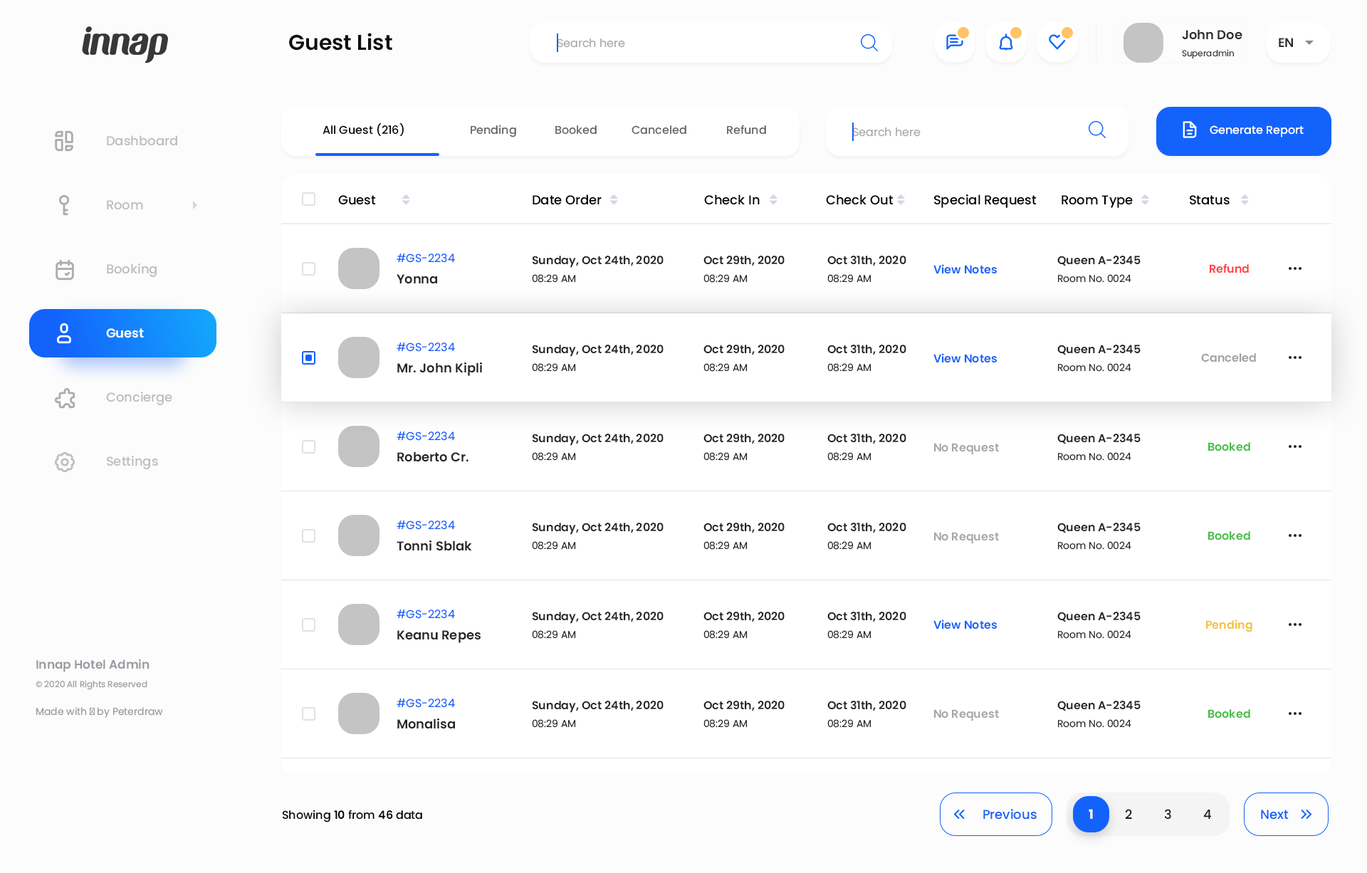
<style>
.page{position:relative;width:1367px;height:873px;background:#ffffff}
.page>*{position:absolute;margin:0}
.t1{font:12.8px "Poppins-SemiBold";color:#2e2e2e}
.t2{font:21.4px "Poppins-SemiBold";color:#0f0f0f}
.t3{font:11.4px "Poppins-Regular";color:#aaaaaa}
.t4{font:8.5px "Poppins-Regular";color:#2e2e2e}
.t5{font:11.4px "Poppins-Medium";color:#000000}
.t6{font:11.4px "Poppins-Medium";color:#666666}
.t7{font:11.4px "Poppins-Medium";color:#ffffff}
.t8{font:12.8px "Poppins-Medium";color:#bfbfbf}
.t9{font:12.8px "Poppins-Medium";color:#000000}
.t10{font:11.4px "Poppins-Regular";color:#1362fc}
.t11{font:11.4px "Poppins-SemiBold";color:#262626}
.t12{font:11.4px "Poppins-SemiBold";color:#1362fc}
.t13{font:11.4px "Poppins-SemiBold";color:#ff4242}
.t14{font:12.8px "Poppins-SemiBold";color:#262626}
.t15{font:10px "Poppins-Regular";color:#262626}
.t16{font:12.8px "Poppins-SemiBold";color:#ffffff}
.t17{font:11.4px "Poppins-SemiBold";color:#a1a1a1}
.t18{font:11.4px "Poppins-SemiBold";color:#a7a7a7}
.t19{font:11.4px "Poppins-SemiBold";color:#45bf43}
.t20{font:11.4px "Poppins-SemiBold";color:#f3c13e}
.t21{font:8.5px/18.5px "Poppins-Regular";color:#969ba0}
.t22{font:12.1px/18.5px "Poppins-SemiBold";color:#969ba0}
.t23{font:10px "Poppins-Regular";color:#969ba0}
.t24{font:11.4px "Poppins-SemiBold";color:#000000}
.t25{font:12.8px "Poppins-Medium";color:#1362fc}
.t26{font:12.8px "Poppins-Bold";color:#ffffff}
.t27{font:12.8px "Poppins-Medium";color:#202020}
</style>
<div class="page">
<p class="t1" style="left:1181px;top:29px;width:61px;height:11px">John Doe</p>
<p class="t2" style="left:289px;top:33px;width:103px;height:18px">Guest List</p>
<p class="t3" style="left:557px;top:38px;width:68px;height:10px">Search here</p>
<p class="t1" style="left:1278px;top:38px;width:15px;height:9px">EN</p>
<p class="t4" style="left:1181px;top:49px;width:52px;height:10px">Superadmin</p>
<p class="t5" style="left:322px;top:123px;width:82px;height:13px">All Guest (216)</p>
<p class="t6" style="left:470px;top:125px;width:46px;height:12px">Pending</p>
<p class="t6" style="left:555px;top:125px;width:41px;height:10px">Booked</p>
<p class="t6" style="left:631px;top:125px;width:55px;height:10px">Canceled</p>
<p class="t6" style="left:727px;top:125px;width:39px;height:10px">Refund</p>
<p class="t7" style="left:1209px;top:125px;width:94px;height:12px">Generate Report</p>
<p class="t8" style="left:107px;top:135px;width:70px;height:11px">Dashboard</p>
<p class="t3" style="left:852px;top:127px;width:68px;height:10px">Search here</p>
<p class="t9" style="left:338px;top:195px;width:38px;height:10px">Guest</p>
<p class="t9" style="left:532px;top:194px;width:69px;height:11px">Date Order</p>
<p class="t9" style="left:704px;top:194px;width:55px;height:11px">Check In</p>
<p class="t9" style="left:826px;top:194px;width:67px;height:11px">Check Out</p>
<p class="t9" style="left:934px;top:194px;width:102px;height:14px">Special Request</p>
<p class="t9" style="left:1061px;top:195px;width:71px;height:13px">Room Type</p>
<p class="t9" style="left:1189px;top:195px;width:40px;height:10px">Status</p>
<p class="t8" style="left:107px;top:200px;width:36px;height:10px">Room</p>
<p class="t10" style="left:396px;top:253px;width:59px;height:10px">#GS-2234</p>
<p class="t11" style="left:532px;top:256px;width:131px;height:12px">Sunday, Oct 24th, 2020</p>
<p class="t11" style="left:703px;top:256px;width:81px;height:10px">Oct 29th, 2020</p>
<p class="t11" style="left:827px;top:256px;width:79px;height:10px">Oct 31th, 2020</p>
<p class="t11" style="left:1057px;top:256px;width:83px;height:9px">Queen A-2345</p>
<p class="t8" style="left:107px;top:263px;width:50px;height:14px">Booking</p>
<p class="t12" style="left:933px;top:264px;width:63px;height:10px">View Notes</p>
<p class="t13" style="left:1209px;top:263px;width:39px;height:10px">Refund</p>
<p class="t14" style="left:396px;top:274px;width:41px;height:10px">Yonna</p>
<p class="t15" style="left:532px;top:274px;width:44px;height:9px">08:29 AM</p>
<p class="t15" style="left:703px;top:274px;width:44px;height:9px">08:29 AM</p>
<p class="t15" style="left:827px;top:274px;width:44px;height:9px">08:29 AM</p>
<p class="t15" style="left:1058px;top:274px;width:73px;height:9px">Room No. 0024</p>
<p class="t16" style="left:106px;top:328px;width:38px;height:10px">Guest</p>
<p class="t10" style="left:396px;top:342px;width:59px;height:10px">#GS-2234</p>
<p class="t11" style="left:532px;top:344px;width:131px;height:13px">Sunday, Oct 24th, 2020</p>
<p class="t11" style="left:703px;top:344px;width:81px;height:11px">Oct 29th, 2020</p>
<p class="t11" style="left:827px;top:344px;width:79px;height:11px">Oct 31th, 2020</p>
<p class="t12" style="left:933px;top:353px;width:63px;height:10px">View Notes</p>
<p class="t11" style="left:1057px;top:344px;width:83px;height:10px">Queen A-2345</p>
<p class="t17" style="left:1201px;top:353px;width:55px;height:9px">Canceled</p>
<p class="t14" style="left:397px;top:362px;width:85px;height:14px">Mr. John Kipli</p>
<p class="t15" style="left:532px;top:363px;width:44px;height:9px">08:29 AM</p>
<p class="t15" style="left:703px;top:363px;width:44px;height:9px">08:29 AM</p>
<p class="t15" style="left:827px;top:363px;width:44px;height:9px">08:29 AM</p>
<p class="t15" style="left:1058px;top:363px;width:73px;height:9px">Room No. 0024</p>
<p class="t8" style="left:106px;top:391px;width:66px;height:14px">Concierge</p>
<p class="t10" style="left:396px;top:431px;width:59px;height:10px">#GS-2234</p>
<p class="t11" style="left:532px;top:433px;width:131px;height:13px">Sunday, Oct 24th, 2020</p>
<p class="t11" style="left:703px;top:433px;width:81px;height:11px">Oct 29th, 2020</p>
<p class="t11" style="left:827px;top:433px;width:79px;height:11px">Oct 31th, 2020</p>
<p class="t11" style="left:1057px;top:433px;width:83px;height:10px">Queen A-2345</p>
<p class="t18" style="left:934px;top:443px;width:65px;height:12px">No Request</p>
<p class="t19" style="left:1208px;top:442px;width:42px;height:9px">Booked</p>
<p class="t8" style="left:107px;top:456px;width:51px;height:13px">Settings</p>
<p class="t14" style="left:397px;top:451px;width:71px;height:11px">Roberto Cr.</p>
<p class="t15" style="left:532px;top:452px;width:44px;height:8px">08:29 AM</p>
<p class="t15" style="left:703px;top:452px;width:44px;height:8px">08:29 AM</p>
<p class="t15" style="left:827px;top:452px;width:44px;height:8px">08:29 AM</p>
<p class="t15" style="left:1058px;top:452px;width:73px;height:8px">Room No. 0024</p>
<p class="t10" style="left:396px;top:520px;width:59px;height:10px">#GS-2234</p>
<p class="t11" style="left:532px;top:522px;width:131px;height:13px">Sunday, Oct 24th, 2020</p>
<p class="t11" style="left:703px;top:522px;width:81px;height:11px">Oct 29th, 2020</p>
<p class="t11" style="left:827px;top:522px;width:79px;height:11px">Oct 31th, 2020</p>
<p class="t18" style="left:934px;top:532px;width:65px;height:12px">No Request</p>
<p class="t11" style="left:1057px;top:522px;width:83px;height:10px">Queen A-2345</p>
<p class="t19" style="left:1208px;top:531px;width:42px;height:9px">Booked</p>
<p class="t14" style="left:396px;top:540px;width:76px;height:11px">Tonni Sblak</p>
<p class="t15" style="left:532px;top:541px;width:44px;height:8px">08:29 AM</p>
<p class="t15" style="left:703px;top:541px;width:44px;height:8px">08:29 AM</p>
<p class="t15" style="left:827px;top:541px;width:44px;height:8px">08:29 AM</p>
<p class="t15" style="left:1058px;top:541px;width:73px;height:8px">Room No. 0024</p>
<p class="t10" style="left:396px;top:609px;width:59px;height:10px">#GS-2234</p>
<p class="t11" style="left:532px;top:611px;width:131px;height:12px">Sunday, Oct 24th, 2020</p>
<p class="t11" style="left:703px;top:611px;width:81px;height:11px">Oct 29th, 2020</p>
<p class="t11" style="left:827px;top:611px;width:79px;height:11px">Oct 31th, 2020</p>
<p class="t11" style="left:1057px;top:611px;width:83px;height:10px">Queen A-2345</p>
<p class="t14" style="left:397px;top:630px;width:83px;height:13px">Keanu Repes</p>
<p class="t15" style="left:532px;top:630px;width:44px;height:8px">08:29 AM</p>
<p class="t15" style="left:703px;top:630px;width:44px;height:8px">08:29 AM</p>
<p class="t15" style="left:827px;top:630px;width:44px;height:8px">08:29 AM</p>
<p class="t12" style="left:933px;top:619px;width:63px;height:10px">View Notes</p>
<p class="t15" style="left:1058px;top:630px;width:73px;height:8px">Room No. 0024</p>
<p class="t20" style="left:1206px;top:619px;width:46px;height:13px">Pending</p>
<p class="t21" style="left:36px;top:658px;width:113px;height:32px"><span class="t22">Innap Hotel Admin<br></span>© 2020 All Rights Reserved</p>
<p class="t10" style="left:396px;top:698px;width:59px;height:9px">#GS-2234</p>
<p class="t11" style="left:532px;top:700px;width:131px;height:12px">Sunday, Oct 24th, 2020</p>
<p class="t11" style="left:703px;top:700px;width:81px;height:11px">Oct 29th, 2020</p>
<p class="t11" style="left:827px;top:700px;width:79px;height:11px">Oct 31th, 2020</p>
<p class="t11" style="left:1057px;top:700px;width:83px;height:10px">Queen A-2345</p>
<p class="t23" style="left:36px;top:707px;width:127px;height:10px">Made with ♥ by Peterdraw</p>
<p class="t18" style="left:934px;top:709px;width:65px;height:12px">No Request</p>
<p class="t19" style="left:1208px;top:709px;width:42px;height:9px">Booked</p>
<p class="t14" style="left:397px;top:718px;width:58px;height:11px">Monalisa</p>
<p class="t15" style="left:532px;top:719px;width:44px;height:8px">08:29 AM</p>
<p class="t15" style="left:703px;top:719px;width:44px;height:8px">08:29 AM</p>
<p class="t15" style="left:827px;top:719px;width:44px;height:8px">08:29 AM</p>
<p class="t15" style="left:1058px;top:719px;width:73px;height:8px">Room No. 0024</p>
<p class="t5" style="left:283px;top:809px;width:139px;height:13px">Showing <span class="t24">10 </span>from <span class="t24">46 </span>data</p>
<p class="t25" style="left:983px;top:809px;width:53px;height:10px">Previous</p>
<p class="t26" style="left:1088px;top:809px;width:5px;height:10px">1</p>
<p class="t27" style="left:1125px;top:809px;width:7px;height:10px">2</p>
<p class="t27" style="left:1164px;top:809px;width:7px;height:10px">3</p>
<p class="t27" style="left:1203px;top:809px;width:8px;height:10px">4</p>
<p class="t25" style="left:1260px;top:809px;width:28px;height:10px">Next</p>
</div>
